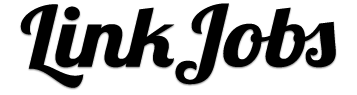
<style>
.page{position:relative;width:357px;height:95px;background:#ffffff}
.page>*{position:absolute;margin:0}
.t1{font:84.1px "Lobster1.4";color:#000000;scale:1.13 1}
</style>
<div class="page">
<p class="t1" style="left:20px;top:3px;width:316px;height:85px">LinkJobs</p>
</div>
